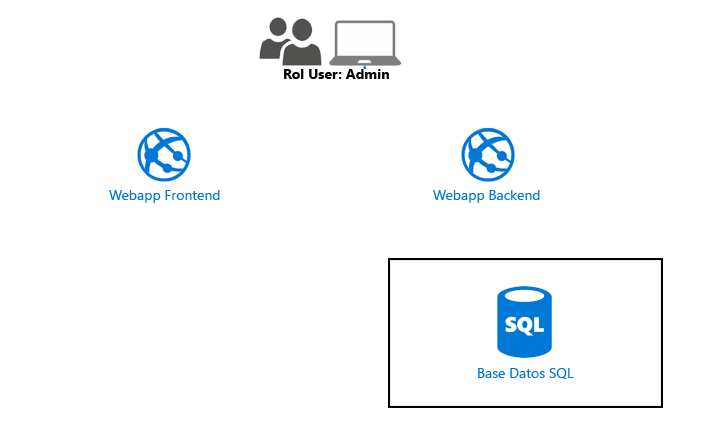
<style>
.page{position:relative;width:709px;height:425px;background:#ffffff}
.page>*{position:absolute;margin:0}
.t1{font:14px "SegoeUI-Bold";color:#060606}
.t2{font:14px "SegoeUI";color:#0078d7}
</style>
<div class="page">
<p class="t1" style="left:284px;top:69px;width:105px;height:10px">Rol User: Admin</p>
<p class="t2" style="left:109px;top:190px;width:111px;height:13px">Webapp Frontend</p>
<p class="t2" style="left:433px;top:190px;width:107px;height:13px">Webapp Backend</p>
<p class="t2" style="left:478px;top:368px;width:96px;height:11px">Base Datos SQL</p>
</div>
